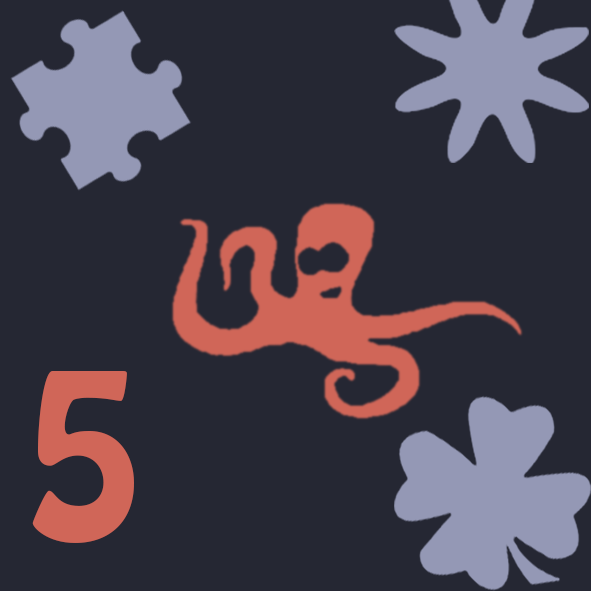
<style>
.page{position:relative;width:591px;height:591px;background:#252733}
.page>*{position:absolute;margin:0}
.t1{font:208.3px "HoboStd";color:#d06658}
</style>
<div class="page">
<p class="t1" style="left:32px;top:371px;width:102px;height:172px">5</p>
</div>
